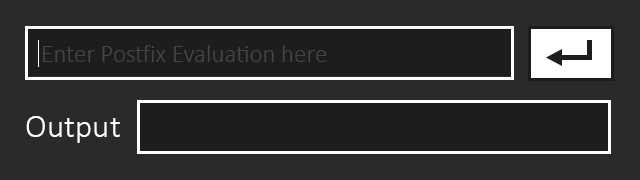
<style>
.page{position:relative;width:640px;height:180px;background:#2a2a2a}
.page>*{position:absolute;margin:0}
.t1{font:25px "Calibri-Light";color:#454545}
.t2{font:33.3px "Calibri-Light";color:#ffffff}
</style>
<div class="page">
<p class="t1" style="left:43px;top:45px;width:284px;height:17px">Enter Postfix Evaluation here</p>
<p class="t2" style="left:26px;top:116px;width:94px;height:27px">Output</p>
</div>
